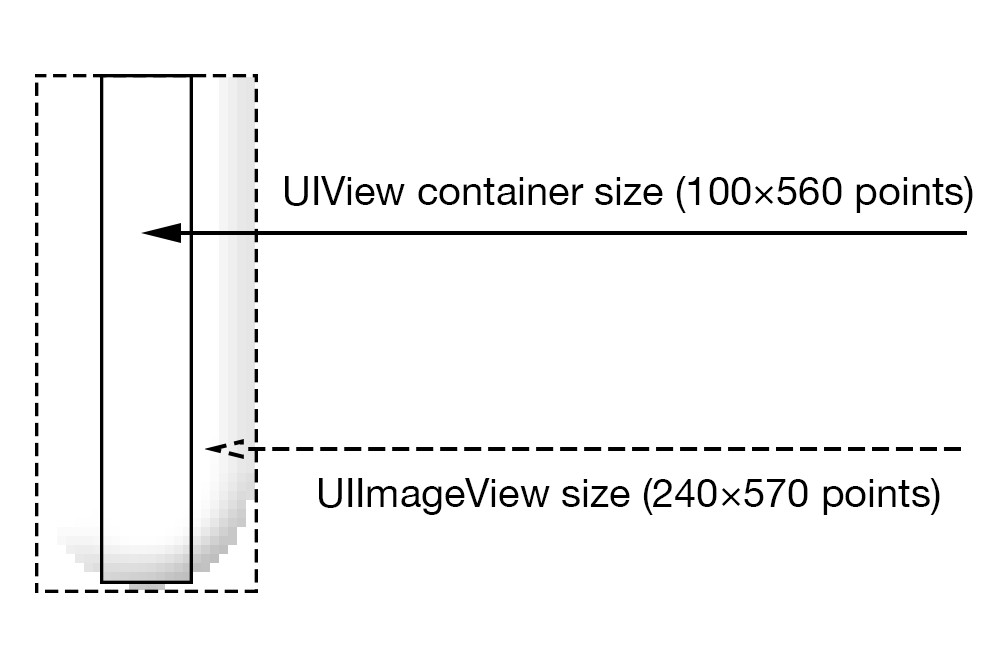
<style>
.page{position:relative;width:1000px;height:667px;background:#ffffff}
.page>*{position:absolute;margin:0}
.t1{font:40px "HelveticaNeue";color:#000000}
</style>
<div class="page">
<p class="t1" style="left:285px;top:176px;width:688px;height:37px">UIView container size (100×560 points)</p>
<p class="t1" style="left:319px;top:478px;width:621px;height:37px">UIImageView size (240×570 points)</p>
</div>
